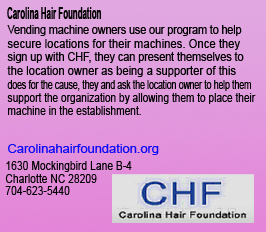
<style>
.page{position:relative;width:266px;height:232px}
.page>*{position:absolute;margin:0}
.t1{font:16.9px "Arial-BoldMT";color:#000000;scale:0.47 1}
.t2{font:12px "ArialMT";color:#000000;scale:0.88 1}
.t3{font:12px "ArialMT";color:#000000;scale:0.94 1}
.t4{font:12px "ArialMT";color:#000000;scale:0.9 1}
.t5{font:12px "ArialMT";color:#000000;scale:0.93 1}
.t6{font:12px "ArialMT";color:#000000;scale:0.71 1}
.t7{font:12px "ArialMT";color:#000000;scale:0.84 1}
.t8{font:12px "ArialMT";color:#0b0bf9;scale:1.07 1}
.t9{font:12px "ArialMT";color:#000000;scale:0.86 1}
</style>
<div class="page">
<p class="t1" style="left:7px;top:7px;width:94px;height:12px">Carolina Hair Foundation</p>
<p class="t2" style="left:7px;top:25px;width:235px;height:11px">Vending machine owners use our program to help</p>
<p class="t3" style="left:7px;top:39px;width:233px;height:11px">secure locations for their machines. Once they</p>
<p class="t4" style="left:7px;top:52px;width:237px;height:11px">sign up with CHF, they can present themselves to</p>
<p class="t5" style="left:7px;top:66px;width:229px;height:11px">the location owner as being a supporter of this</p>
<p class="t6" style="left:7px;top:80px;width:244px;height:11px">does for the cause, they and ask the location owner to help them</p>
<p class="t7" style="left:7px;top:93px;width:249px;height:11px">support the organization by allowing them to place their</p>
<p class="t7" style="left:8px;top:106px;width:133px;height:9px">machine in the establishment.</p>
<p class="t8" style="left:8px;top:144px;width:151px;height:11px">Carolinahairfoundation.org</p>
<p class="t9" style="left:6px;top:161px;width:126px;height:11px">1630 Mockingbird Lane B-4</p>
<p class="t9" style="left:5px;top:174px;width:92px;height:9px">Charlotte NC 28209</p>
<p class="t9" style="left:5px;top:186px;width:65px;height:9px">704-623-5440</p>
</div>
